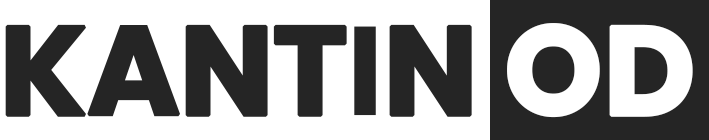
<style>
.page{position:relative;width:709px;height:140px;background:#ffffff}
.page>*{position:absolute;margin:0}
.t1{font:125px "Poppins-Bold";letter-spacing:-0.02em;color:#252525;font-weight:bold}
.t2{font:125px "Poppins-Bold";letter-spacing:-0.02em;color:#ffffff;font-weight:bold}
</style>
<div class="page">
<p class="t1" style="left:5px;top:23px;width:688px;height:95px"><span class="t2"><br></span>KANTIN <span class="t2">OD</span></p>
</div>
